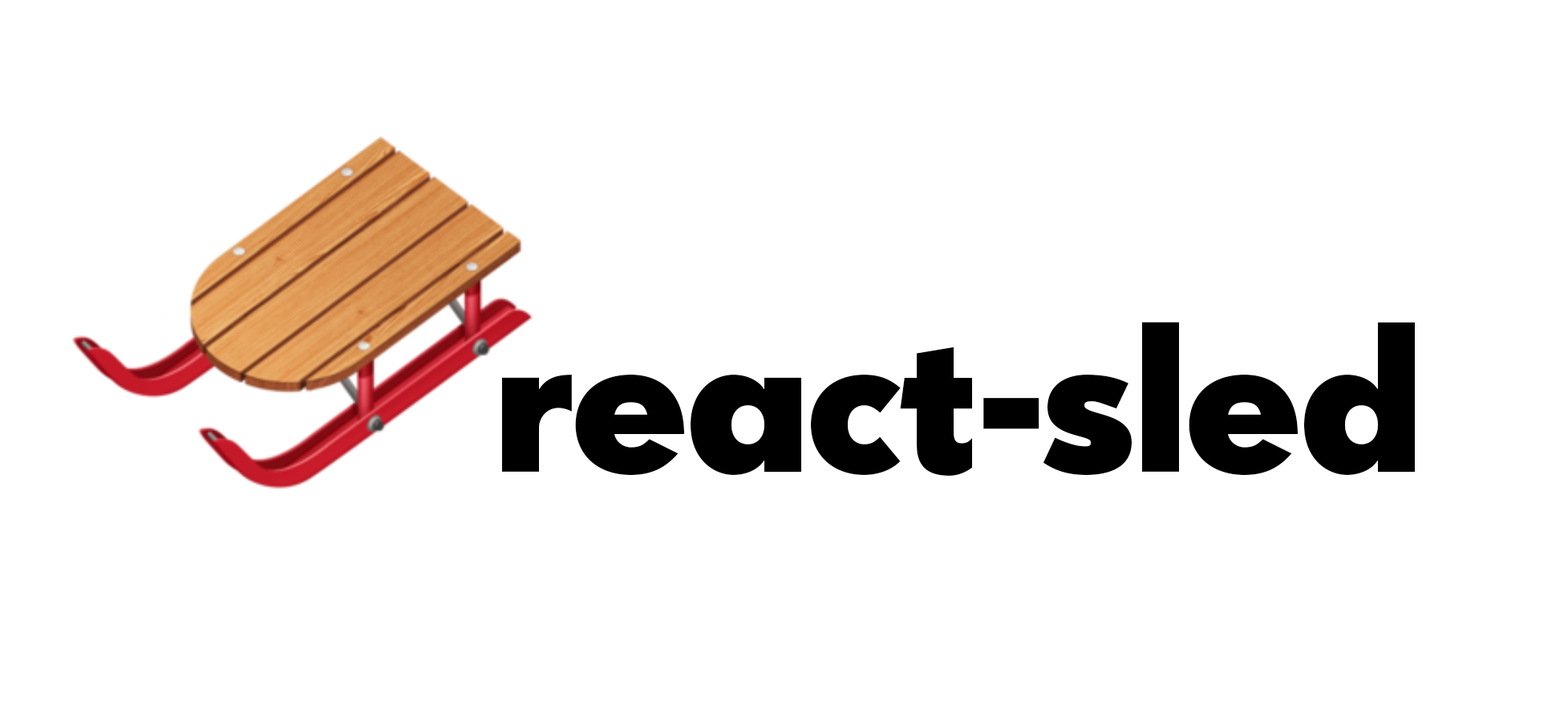
<style>
.page{position:relative;width:1568px;height:706px;background:#ffffff}
.page>*{position:absolute;margin:0}
.t1{font:204.8px "SuperGroteskC-Bd";letter-spacing:-0.03em;color:#000000}
</style>
<div class="page">
<p class="t1" style="left:502px;top:322px;width:913px;height:154px">react-sled</p>
</div>
